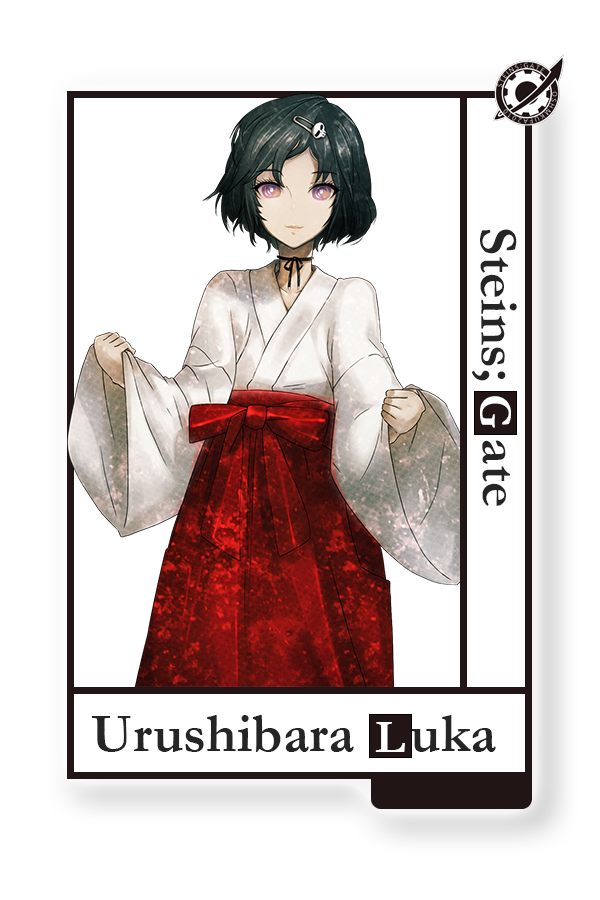
<style>
.page{position:relative;width:600px;height:900px;background:#ffffff}
.page>*{position:absolute;margin:0}
.t1{font:55.4px "Garamond-Bold";color:#252525}
.t2{font:47px "Garamond-Bold";color:#ffffff}
</style>
<div class="page">
<p class="t1" style="left:472px;top:229px;width:45px;height:277px;rotate:89deg">Steins;    ate</p>
<p class="t2" style="left:480px;top:396px;width:31px;height:32px;rotate:90deg">G</p>
<p class="t1" style="left:92px;top:715px;width:404px;height:37px">Urushibara    uka</p>
<p class="t2" style="left:375px;top:722px;width:30px;height:30px">L</p>
</div>
